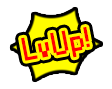
<style>
.page{position:relative;width:112px;height:89px;background:#ffffff}
.page>*{position:absolute;margin:0}
.t1{font:30px "Small Fonts";letter-spacing:0.06em;color:#ff0000;font-weight:bold}
</style>
<div class="page">
<p class="t1" style="left:21px;top:27px;width:69px;height:34px;rotate:-11deg">LvUp!</p>
</div>
